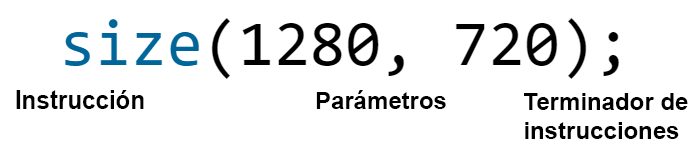
<style>
.page{position:relative;width:695px;height:150px;background:#ffffff}
.page>*{position:absolute;margin:0}
.t1{font:19.5px "Arial-BoldMT";color:#000000;scale:0.93 1}
.t2{font:24px "Arial-BoldMT";color:#000000}
</style>
<div class="page">
<p class="t1" style="left:16px;top:90px;width:128px;height:19px">Instrucción</p>
<p class="t2" style="left:316px;top:90px;width:130px;height:19px">Parámetros</p>
<p class="t2" style="left:524px;top:93px;width:164px;height:46px">Terminador de <br>instrucciones</p>
</div>
